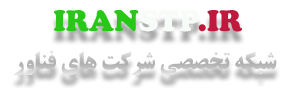
<style>
.page{position:relative;width:288px;height:88px;background:#ffffff}
.page>*{position:absolute;margin:0}
.t1{font:30.5px "CooperBlack";color:#27c916}
.t2{font:30.5px "CooperBlack";color:#f8fcf8}
.t3{font:30.5px "CooperBlack";color:#c1193d}
.t4{font:24px "BTitrBold";color:#bababa}
</style>
<div class="page">
<p class="t1" style="left:54px;top:10px;width:188px;height:22px">IRAN<span class="t2">STP</span><span class="t3">.IR</span></p>
<p class="t4" style="left:14px;top:50px;width:263px;height:25px">شبکه تخصصی شرکت های فناور</p>
</div>
